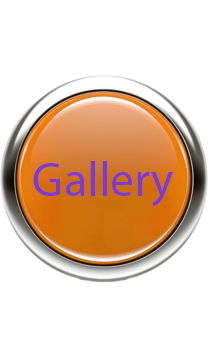
<style>
.page{position:relative;width:208px;height:360px;background:#ffffff}
.page>*{position:absolute;margin:0}
.t1{font:48.5px "MyriadPro-Regular";color:#7c3cd2}
</style>
<div class="page">
<p class="t1" style="left:33px;top:161px;width:140px;height:46px">Gallery</p>
</div>
